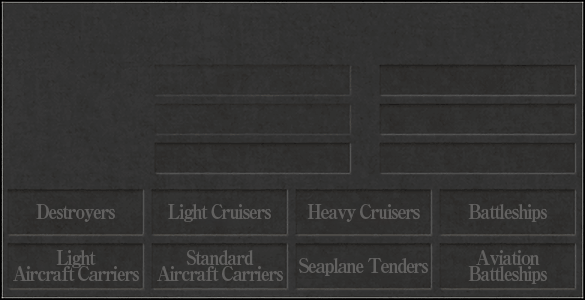
<style>
.page{position:relative;width:585px;height:300px}
.page>*{position:absolute;margin:0}
.t1{font:20px "RyuminPro-ExBold";letter-spacing:-0.08em;color:#656463;scale:0.9 1}
.t2{font:20px/16px "RyuminPro-ExBold";letter-spacing:-0.08em;color:#656463;scale:0.9 1}
</style>
<div class="page">
<p class="t1" style="left:36px;top:204px;width:79px;height:18px">Destroyers</p>
<p class="t1" style="left:168px;top:204px;width:103px;height:18px">Light Cruisers</p>
<p class="t1" style="left:307px;top:204px;width:113px;height:18px">Heavy Cruisers</p>
<p class="t1" style="left:468px;top:204px;width:79px;height:18px">Battleships</p>
<p class="t2" style="left:13px;top:250px;width:126px;height:32px;text-align:center">Light<br>Aircraft Carriers</p>
<p class="t2" style="left:157px;top:250px;width:126px;height:32px;text-align:center">Standard<br>Aircraft Carriers</p>
<p class="t2" style="left:468px;top:250px;width:79px;height:34px;text-align:center">Aviation<br>Battleships</p>
<p class="t1" style="left:299px;top:258px;width:129px;height:18px">Seaplane Tenders</p>
</div>
